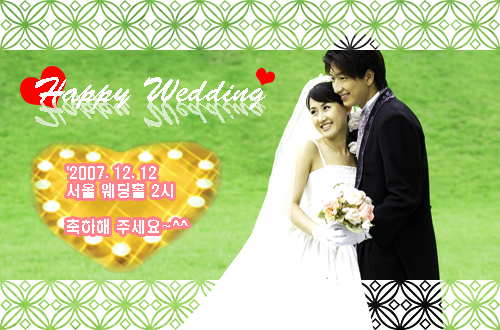
<style>
.page{position:relative;width:500px;height:330px;background:#ffffff}
.page>*{position:absolute;margin:0}
.t1{font:35px "BrushScriptStd";color:#ffffff}
.t2{font:35px "BrushScriptStd";color:#d8ebc7}
.t3{font:15px "H2hdrM";color:#ffffff}
</style>
<div class="page">
<p class="t1" style="left:35px;top:77px;width:231px;height:33px">Happy Wedding</p>
<p class="t2" style="left:35px;top:94px;width:231px;height:33px">Happy Wedding</p>
<p class="t3" style="left:67px;top:166px;width:121px;height:68px">'2007. 12. 12<br>서울 웨딩홀 2시<br><br>축하해 주세요~^^</p>
</div>
